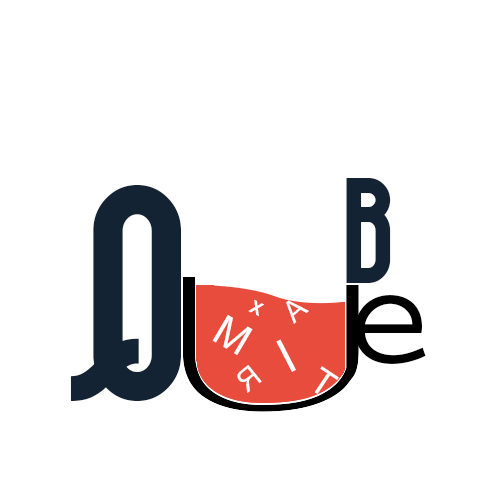
<style>
.page{position:relative;width:500px;height:500px;background:#ffffff}
.page>*{position:absolute;margin:0}
.t1{font:216.3px "Bazar";letter-spacing:0.05em;color:#132333}
.t2{font:108.3px "Bazar";letter-spacing:0.05em;color:#132333}
.t3{font:25px "Utsaah-Bold";letter-spacing:0.05em;color:#ffffff}
.t4{font:41.7px "Utsaah";letter-spacing:0.05em;color:#ffffff}
.t5{font:158.3px "PrestigeEliteStd-Bd";letter-spacing:0.05em;color:#000000}
.t6{font:58.3px "Utsaah";letter-spacing:0.05em;color:#ffffff}
.t7{font:66.7px "Utsaah";letter-spacing:0.05em;color:#ffffff}
.t8{font:41.9px "Utsaah";letter-spacing:0.05em;color:#ffffff}
.t9{font:50px "Utsaah";letter-spacing:0.05em;color:#ffffff}
</style>
<div class="page">
<p class="t1" style="left:70px;top:185px;width:111px;height:216px;rotate:180deg">Q</p>
<p class="t2" style="left:346px;top:178px;width:45px;height:105px">B</p>
<p class="t3" style="left:248px;top:299px;width:16px;height:18px;rotate:26deg">X</p>
<p class="t4" style="left:286px;top:300px;width:23px;height:24px;rotate:-41deg">A</p>
<p class="t5" style="left:354px;top:295px;width:72px;height:69px">e</p>
<p class="t6" style="left:212px;top:314px;width:41px;height:41px;rotate:31deg">M</p>
<p class="t7" style="left:276px;top:339px;width:20px;height:33px;rotate:-27deg">I</p>
<p class="t8" style="left:237px;top:365px;width:25px;height:28px;rotate:141deg">R</p>
<p class="t9" style="left:314px;top:366px;width:25px;height:28px;rotate:34deg">T</p>
</div>
